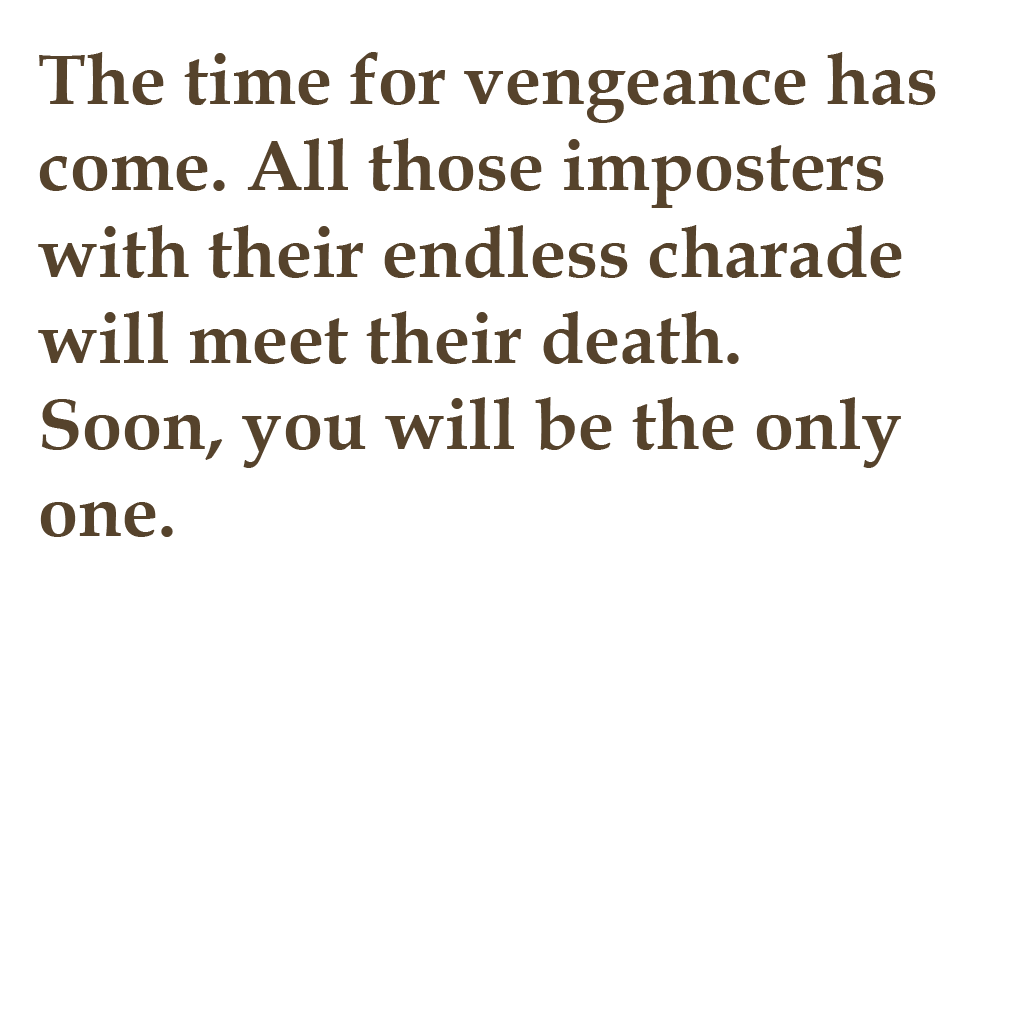
<style>
.page{position:relative;width:1025px;height:1024px;background:#ffffff}
.page>*{position:absolute;margin:0}
.t1{font:72px "BookAntiqua-Bold";color:#56432c}
</style>
<div class="page">
<p class="t1" style="left:38px;top:52px;width:898px;height:485px">The time for vengeance has come. All those imposters with their endless charade will meet their death.<br>Soon, you will be the only one.</p>
</div>
